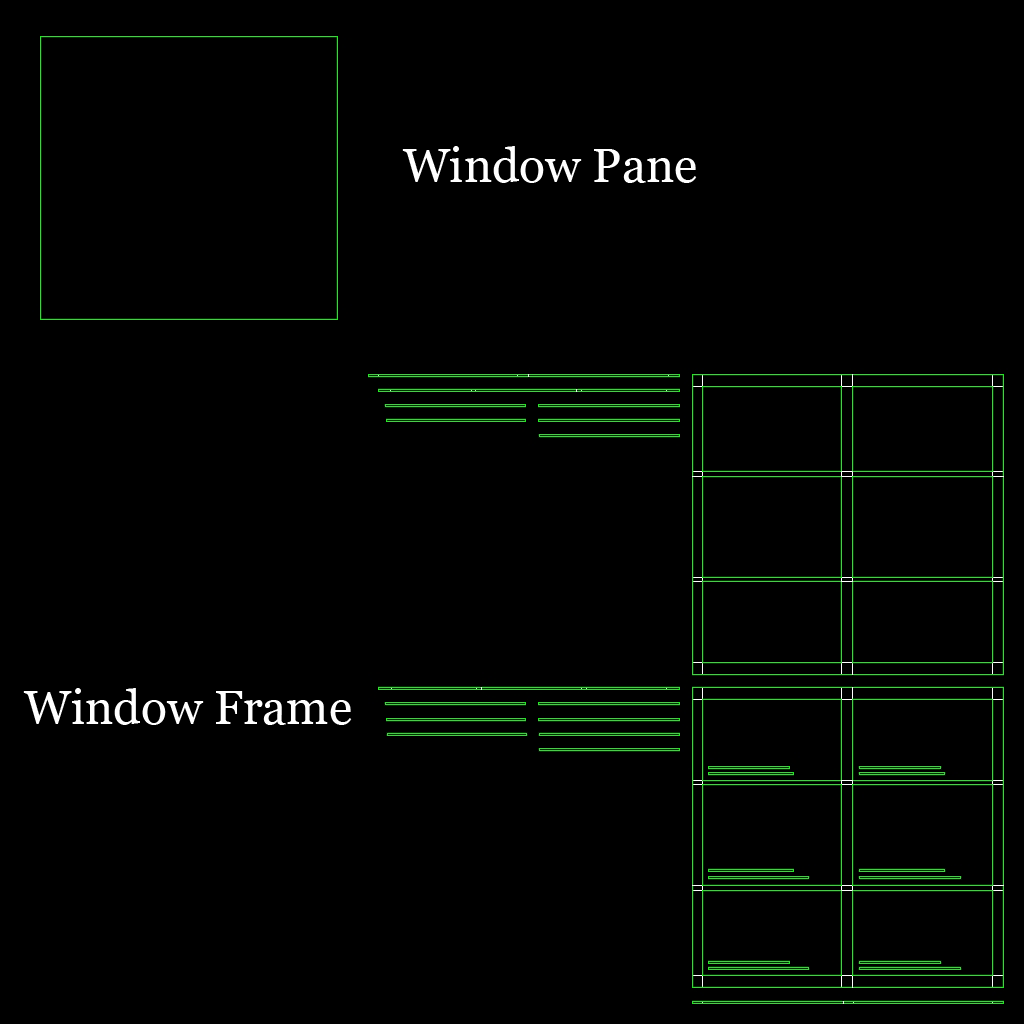
<style>
.page{position:relative;width:1024px;height:1024px;background:#000000}
.page>*{position:absolute;margin:0}
.t1{font:48px "Georgia";color:#ffffff}
</style>
<div class="page">
<p class="t1" style="left:402px;top:146px;width:295px;height:37px">Window Pane</p>
<p class="t1" style="left:23px;top:688px;width:329px;height:37px">Window Frame</p>
</div>
